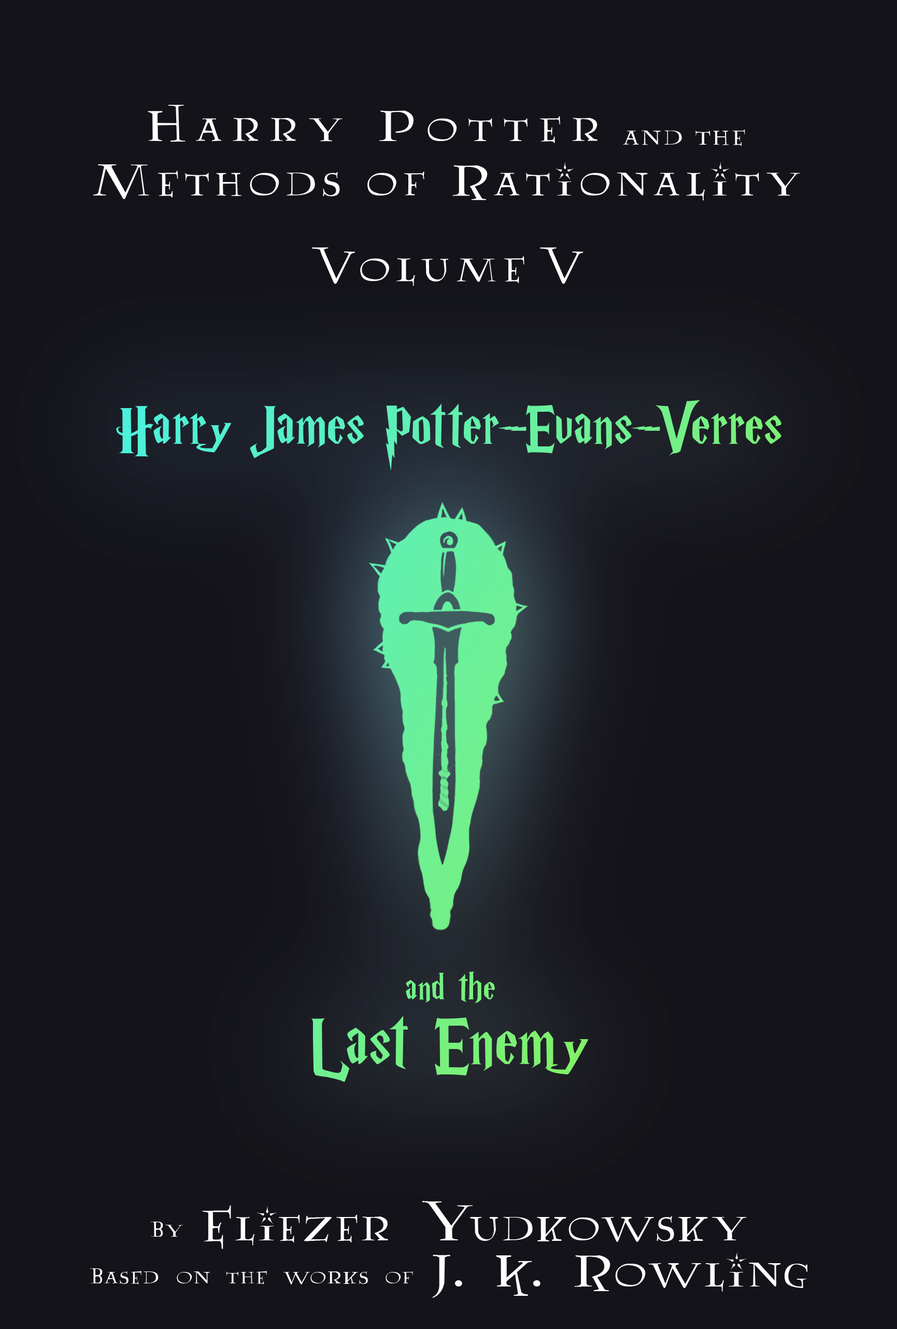
<style>
.page{position:relative;width:897px;height:1329px;background:#141319}
.page>*{position:absolute;margin:0}
.t1{font:50.3px/54.5px "Lumos";letter-spacing:0.1em;color:#ffffff}
.t2{font:50.3px/35.7px "Lumos";letter-spacing:0.2em;color:#ffffff}
.t3{font:31.1px/35.7px "Lumos";letter-spacing:0.05em;color:#ffffff}
.t4{font:50.3px "Lumos";letter-spacing:0.1em;color:#ffffff}
.t5{font:64.8px/77.8px "HarryPotterRussianVersionofGfdtk";letter-spacing:0.025em}
.t6{font:41.5px/77.8px "HarryPotterRussianVersionofGfdtk";letter-spacing:0.025em}
.t7{font:77.8px/77.8px "HarryPotterRussianVersionofGfdtk";letter-spacing:0.025em}
.t8{font:25.9px/46.1px "AA-Lumos-Caps";letter-spacing:0.05em;color:#ffffff}
.t9{font:51.8px/46.1px "AA-Lumos-Caps";letter-spacing:0.05em;color:#ffffff}
</style>
<div class="page">
<p class="t1" style="left:93px;top:105px;width:707px;height:96px;text-align:center"><span class="t2">Harry Potter  </span><span class="t3">and the<br></span>Methods of Rationality</p>
<p class="t4" style="left:312px;top:247px;width:272px;height:39px">Volume V</p>
<p class="t5" style="left:116px;top:400px;width:666px;height:682px;text-align:center">Harry James Potter-Evans-Verres<br><br><br><br><br><br><br><span class="t6">and the<br></span><span class="t7">Last Enemy</span></p>
<p class="t8" style="left:90px;top:1201px;width:718px;height:97px;text-align:center">By <span class="t9">Eliezer Yudkowsky<br></span>Based on the works of <span class="t9">J. K. Rowling</span></p>
</div>
